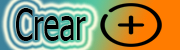
<style>
.page{position:relative;width:180px;height:50px}
.page>*{position:absolute;margin:0}
.t1{font:42.5px "Tahoma";color:#000000;scale:0.71 1}
</style>
<div class="page">
<p class="t1" style="left:16px;top:8px;width:70px;height:33px">Crear</p>
</div>
